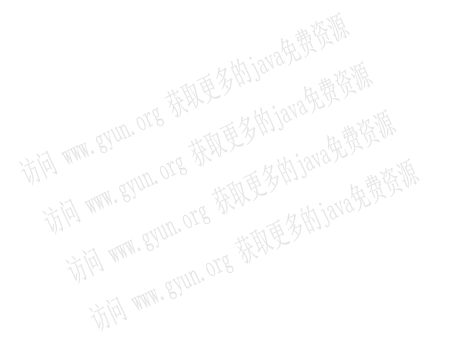
<style>
.page{position:relative;width:454px;height:340px;background:#ffffff}
.page>*{position:absolute;margin:0}
.t1{font:30.9px "SimSun";color:#e5e5e5;scale:0.58 1}
</style>
<div class="page">
<p class="t1" style="left:18px;top:12px;width:402px;height:320px;rotate:-25deg">访问 www.gyun.org 获取更多的java免费资源<br>访问 www.gyun.org 获取更多的java免费资源<br>访问 www.gyun.org 获取更多的java免费资源<br>访问 www.gyun.org 获取更多的java免费资源</p>
</div>
